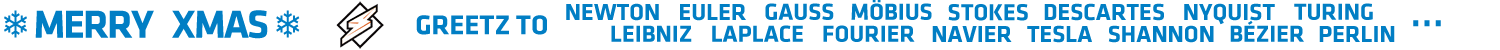
<style>
.page{position:relative;width:1500px;height:50px;background:#ffffff}
.page>*{position:absolute;margin:0}
.t1{font:24px "KlavikaWebBasic-Bold";color:#017ec4}
.t2{font:28px "KlavikaWebBasic-Bold";color:#017ec4}
.t3{font:36px "KlavikaWebBasic-Bold";letter-spacing:0.04em;color:#017ec4}
</style>
<div class="page">
<p class="t1" style="left:566px;top:3px;width:93px;height:18px">NEWTON</p>
<p class="t1" style="left:680px;top:4px;width:66px;height:17px">EULER</p>
<p class="t1" style="left:765px;top:3px;width:69px;height:17px">GAUSS</p>
<p class="t1" style="left:851px;top:0px;width:81px;height:20px">MÖBIUS</p>
<p class="t1" style="left:948px;top:4px;width:80px;height:17px">STOKES</p>
<p class="t1" style="left:1044px;top:3px;width:120px;height:18px">DESCARTES</p>
<p class="t1" style="left:1184px;top:3px;width:91px;height:22px">NYQUIST</p>
<p class="t1" style="left:1294px;top:3px;width:79px;height:17px">TURING</p>
<p class="t2" style="left:416px;top:15px;width:131px;height:20px">GREETZ TO</p>
<p class="t1" style="left:611px;top:25px;width:81px;height:17px">LEIBNIZ</p>
<p class="t1" style="left:712px;top:25px;width:91px;height:17px">LAPLACE</p>
<p class="t1" style="left:823px;top:25px;width:92px;height:17px">FOURIER</p>
<p class="t1" style="left:932px;top:26px;width:80px;height:16px">NAVIER</p>
<p class="t1" style="left:1027px;top:25px;width:65px;height:18px">TESLA</p>
<p class="t1" style="left:1108px;top:25px;width:106px;height:18px">SHANNON</p>
<p class="t1" style="left:1230px;top:20px;width:74px;height:22px">BÉZIER</p>
<p class="t1" style="left:1319px;top:26px;width:76px;height:16px">PERLIN</p>
<p class="t3" style="left:1413px;top:20px;width:28px;height:7px">...</p>
</div>
